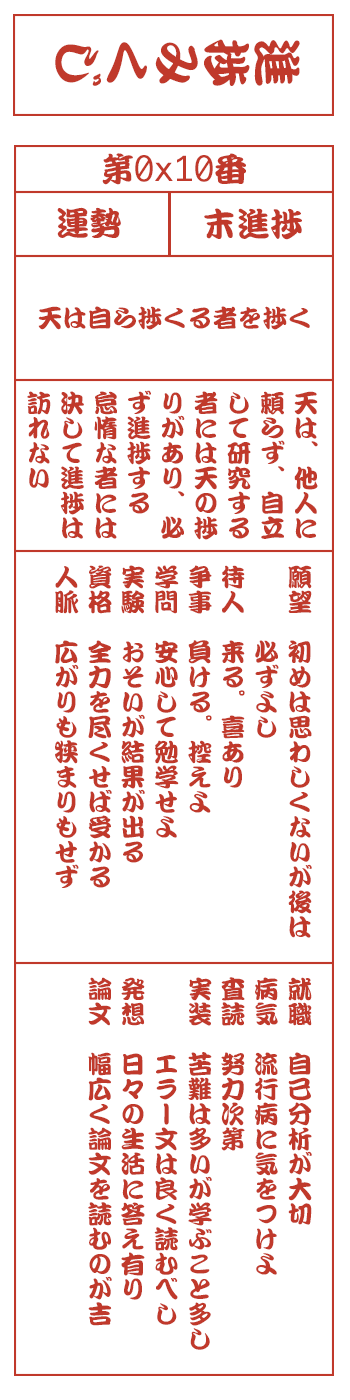
<style>
.page{position:relative;width:350px;height:1400px;background:#ffffff}
.page>*{position:absolute;margin:0}
.t1{font:50px "DFKanTeiRyu-XB-MP-RKSJ-H";color:#c0392b}
.t2{font:33.3px "Monaco";color:#c0392b}
.t3{font:33.3px "DFKanTeiRyu-XB-MP-RKSJ-H";color:#c0392b}
.t4{font:25px "DFKanTeiRyu-XB-MP-RKSJ-H";color:#c0392b}
.t5{font:25px/33.3px "DFKanTeiRyu-XB-MP-RKSJ-H";color:#c0392b}
</style>
<div class="page">
<p class="t1" style="left:55px;top:39px;width:245px;height:47px;rotate:90deg">進捗みくじ</p>
<p class="t2" style="left:102px;top:153px;width:144px;height:32px"><span class="t3">第</span>0x10<span class="t3">番</span></p>
<p class="t3" style="left:57px;top:207px;width:64px;height:31px">運勢</p>
<p class="t3" style="left:204px;top:208px;width:98px;height:32px">末進捗</p>
<p class="t4" style="left:38px;top:306px;width:272px;height:24px">天は自ら捗くる者を捗く</p>
<p class="t5" style="left:27px;top:390px;width:291px;height:150px">天は、他人に<br>頼らず、自立<br>して研究する<br>者には天の捗<br>りがあり、必<br>ず進捗する<br>怠惰な者には<br>決して進捗は<br>訪れない</p>
<p class="t5" style="left:55px;top:565px;width:257px;height:373px">願望　初めは思わしくないが後は<br>　　　必ずよし<br>待人　来る。喜あり<br>争事　負ける。控えよ<br>学問　安心して勉学せよ<br>実験　おそいが結果が出る<br>資格　全力を尽くせば受かる<br>人脈　広がりも狭まりもせず</p>
<p class="t5" style="left:88px;top:977px;width:224px;height:373px">就職　自己分析が大切<br>病気　流行病に気をつけよ<br>査読　努力次第<br>実装　苦難は多いが学ぶこと多し<br>　　　エラー文は良く読むべし<br>発想　日々の生活に答え有り<br>論文　幅広く論文を読むのが吉</p>
</div>
